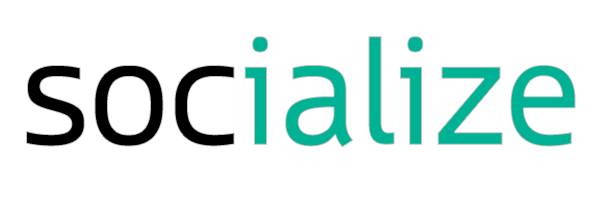
<style>
.page{position:relative;width:600px;height:200px;background:#ffffff}
.page>*{position:absolute;margin:0}
.t1{font:147px "WascoSans";letter-spacing:-0.02em;color:#00b294}
.t2{font:147px "WascoSans";letter-spacing:-0.02em;color:#000000}
</style>
<div class="page">
<p class="t1" style="left:26px;top:36px;width:550px;height:112px"><span class="t2">soc</span>ialize</p>
</div>
